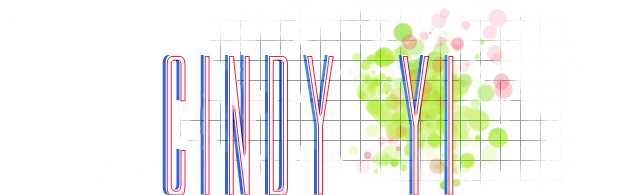
<style>
.page{position:relative;width:639px;height:195px;background:#ffffff}
.page>*{position:absolute;margin:0}
.t1{font:200px "MovieLetters"}
</style>
<div class="page">
<p class="t1" style="left:162px;top:55px;width:288px;height:140px">cindy yi</p>
</div>
